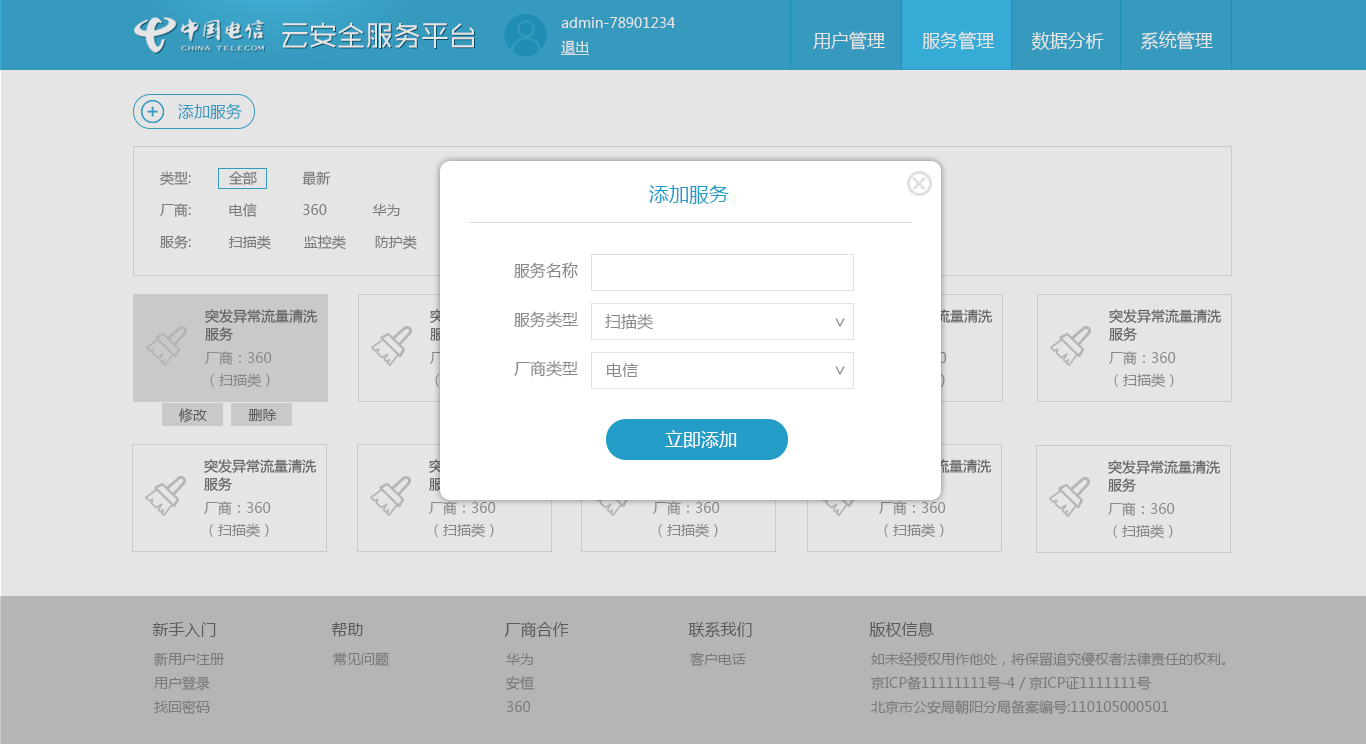
<style>
.page{position:relative;width:1366px;height:744px;background:#e5e5e5}
.page>*{position:absolute;margin:0}
.t1{font:14px/24px "MicrosoftYaHei";color:#e5e5e5}
.t2{font:14px/24px "MicrosoftYaHei";color:#e5e5e5;text-decoration:underline}
.t3{font:28px "MFShangHei_Noncommercial-Regular";color:#e5e5e5}
.t4{font:18px "MicrosoftYaHei";color:#e5e5e5}
.t5{font:16px "MicrosoftYaHei";color:#3cacd4}
.t6{font:14px/32px "MicrosoftYaHei";color:#888888}
.t7{font:20px "MicrosoftYaHei";color:#239dc8}
.t8{font:16px/49px "MicrosoftYaHei";color:#888888}
.t9{font:14px/18px "MicrosoftYaHei";color:#666666}
.t10{font:16px "MicrosoftYaHei";color:#888888}
.t11{font:18px "MicrosoftYaHei";color:#888888}
.t12{font:14px/18px "MicrosoftYaHei"}
.t13{font:14px/22.2px "MicrosoftYaHei";color:#999999}
.t14{font:14px "MicrosoftYaHei";color:#666666}
.t15{font:18px "MicrosoftYaHei";color:#ffffff}
.t16{font:14px/18px "MicrosoftYaHei";color:#ffffff}
.t17{font:16px "MicrosoftYaHei";color:#666666}
.t18{font:14px/24px "MicrosoftYaHei";color:#888888}
.t19{font:14px "MicrosoftYaHei";color:#888888}
</style>
<div class="page">
<p class="t1" style="left:561px;top:17px;width:114px;height:38px">admin-78901234<br><span class="t2">退出</span></p>
<p class="t3" style="left:282px;top:22px;width:192px;height:26px">云安全服务平台</p>
<p class="t4" style="left:813px;top:31px;width:400px;height:19px">用户管理       服务管理       数据分析       系统管理</p>
<p class="t5" style="left:178px;top:103px;width:64px;height:17px">添加服务</p>
<p class="t6" style="left:160px;top:171px;width:388px;height:79px">类型:         全部           最新<br>厂商:         电信           360           华为           绿盟           其他<br>服务:         扫描类        监控类       防护类       其他</p>
<p class="t7" style="left:649px;top:185px;width:80px;height:19px">添加服务</p>
<p class="t8" style="left:514px;top:262px;width:64px;height:115px">服务名称<br>服务类型<br>厂商类型</p>
<p class="t9" style="left:205px;top:309px;width:112px;height:32px">突发异常流量清洗<br>服务</p>
<p class="t10" style="left:605px;top:313px;width:48px;height:17px">扫描类</p>
<p class="t11" style="left:835px;top:318px;width:10px;height:9px">&gt;</p>
<p class="t12" style="left:880px;top:309px;width:112px;height:32px">突发异常流量清洗<br>服务</p>
<p class="t9" style="left:1109px;top:309px;width:112px;height:32px">突发异常流量清洗<br>服务</p>
<p class="t13" style="left:205px;top:351px;width:67px;height:37px">厂商：360<br>（扫描类）</p>
<p class="t13" style="left:1109px;top:351px;width:67px;height:37px">厂商：360<br>（扫描类）</p>
<p class="t10" style="left:607px;top:363px;width:31px;height:14px">电信</p>
<p class="t11" style="left:835px;top:366px;width:10px;height:9px">&gt;</p>
<p class="t14" style="left:179px;top:408px;width:98px;height:15px">修改          删除</p>
<p class="t15" style="left:665px;top:430px;width:72px;height:18px">立即添加</p>
<p class="t9" style="left:204px;top:459px;width:112px;height:32px">突发异常流量清洗<br>服务</p>
<p class="t16" style="left:879px;top:459px;width:112px;height:32px">突发异常流量清洗<br>服务</p>
<p class="t9" style="left:1108px;top:460px;width:112px;height:32px">突发异常流量清洗<br>服务</p>
<p class="t13" style="left:204px;top:501px;width:67px;height:37px">厂商：360<br>（扫描类）</p>
<p class="t13" style="left:429px;top:501px;width:67px;height:37px">厂商：360<br>（扫描类）</p>
<p class="t13" style="left:653px;top:501px;width:67px;height:37px">厂商：360<br>（扫描类）</p>
<p class="t13" style="left:879px;top:501px;width:67px;height:37px">厂商：360<br>（扫描类）</p>
<p class="t13" style="left:1108px;top:502px;width:67px;height:37px">厂商：360<br>（扫描类）</p>
<p class="t17" style="left:152px;top:622px;width:64px;height:15px">新手入门</p>
<p class="t17" style="left:331px;top:622px;width:32px;height:15px">帮助</p>
<p class="t17" style="left:504px;top:621px;width:65px;height:17px">厂商合作</p>
<p class="t17" style="left:688px;top:622px;width:64px;height:16px">联系我们</p>
<p class="t17" style="left:869px;top:621px;width:65px;height:16px">版权信息</p>
<p class="t18" style="left:154px;top:652px;width:70px;height:62px">新用户注册<br>用户登录<br>找回密码</p>
<p class="t19" style="left:333px;top:652px;width:56px;height:14px">常见问题</p>
<p class="t18" style="left:506px;top:653px;width:28px;height:59px">华为<br>安恒<br>360</p>
<p class="t19" style="left:690px;top:652px;width:56px;height:14px">客户电话</p>
<p class="t18" style="left:871px;top:652px;width:355px;height:63px">如未经授权用作他处，将保留追究侵权者法律责任的权利。<br>京ICP备11111111号-4 / 京ICP证1111111号<br>北京市公安局朝阳分局备案编号:110105000501</p>
</div>
